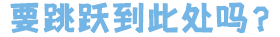
<style>
.page{position:relative;width:280px;height:37px;background:#ffffff}
.page>*{position:absolute;margin:0}
.t1{font:33.7px "shetumodengxiaofangti";color:#73b5e4;font-weight:bold}
</style>
<div class="page">
<p class="t1" style="left:10px;top:2px;width:259px;height:32px">要跳跃到此处吗？</p>
</div>
